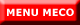
<style>
.page{position:relative;width:80px;height:25px;background:#ff0000}
.page>*{position:absolute;margin:0}
.t1{font:10px "Verdana-Bold";color:#ffffff}
</style>
<div class="page">
<p class="t1" style="left:7px;top:8px;width:67px;height:8px">MENU MECO</p>
</div>
